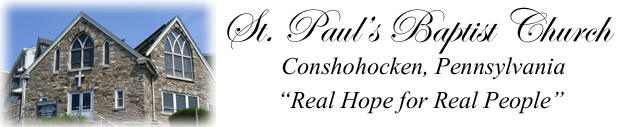
<style>
.page{position:relative;width:626px;height:127px;background:#ffffff}
.page>*{position:absolute;margin:0}
.t1{font:48px "EdwardianScriptITC";color:#000000}
.t2{font:30px "Vijaya";color:#000000}
</style>
<div class="page">
<p class="t1" style="left:227px;top:7px;width:388px;height:47px">St. Paul’s Baptist Church</p>
<p class="t2" style="left:282px;top:57px;width:283px;height:23px">Conshohocken, Pennsylvania</p>
<p class="t2" style="left:281px;top:91px;width:283px;height:23px">“Real Hope for Real People”</p>
</div>
